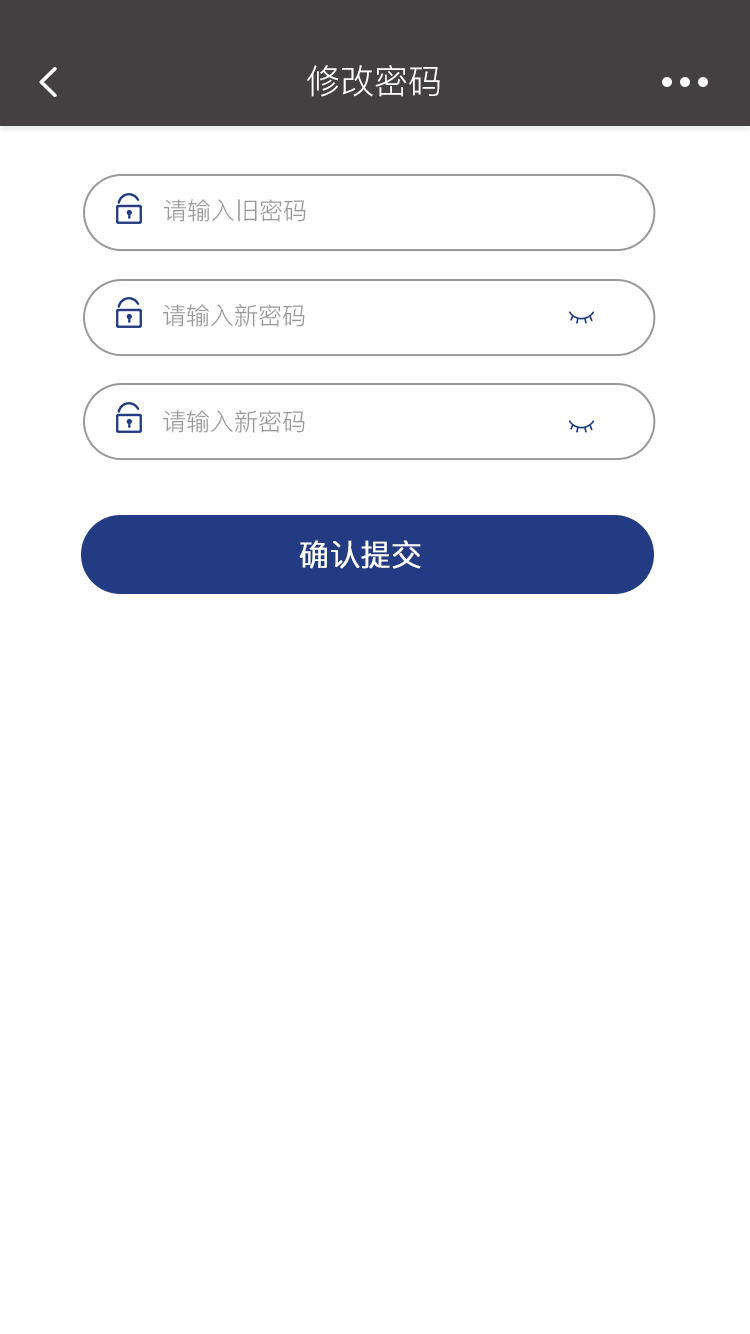
<style>
.page{position:relative;width:750px;height:1334px;background:#ffffff}
.page>*{position:absolute;margin:0}
.t1{font:34px "PingFang-SC-Regular";color:#ffffff}
.t2{font:24px "PingFang-SC-Regular";color:#999999}
.t3{font:30px "PingFang-SC-Regular";color:#ffffff;font-weight:bold}
</style>
<div class="page">
<p class="t1" style="left:307px;top:65px;width:133px;height:32px">修改密码</p>
<p class="t2" style="left:163px;top:199px;width:143px;height:23px">请输入旧密码</p>
<p class="t2" style="left:162px;top:304px;width:143px;height:23px">请输入新密码</p>
<p class="t2" style="left:162px;top:410px;width:143px;height:23px">请输入新密码</p>
<p class="t3" style="left:299px;top:540px;width:122px;height:29px">确认提交</p>
</div>
